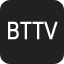
<style>
.page{position:relative;width:64px;height:64px;background:#212121}
.page>*{position:absolute;margin:0}
.t1{font:24px "ArialMT";color:#ffffff;font-weight:bold;scale:0.8 1}
</style>
<div class="page">
<p class="t1" style="left:8px;top:21px;width:50px;height:19px">BTTV</p>
</div>
